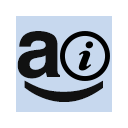
<style>
.page{position:relative;width:128px;height:128px;background:#ffffff}
.page>*{position:absolute;margin:0}
.t1{font:84px "Helvetica-Bold";color:#111111}
</style>
<div class="page">
<p class="t1" style="left:17px;top:31px;width:43px;height:48px">a</p>
<p class="t1" style="left:24px;top:80px;width:79px;height:22px">͜</p>
</div>
